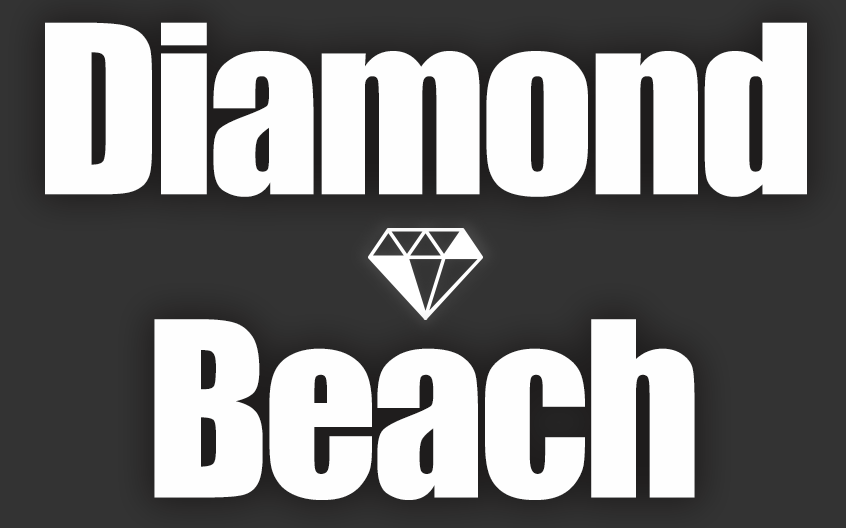
<style>
.page{position:relative;width:846px;height:528px;background:#fefefe}
.page>*{position:absolute;margin:0}
.t1{font:216.8px "Impact";letter-spacing:-0.03em;color:#fefefe;scale:1.03 1}
.t2{font:225.1px "Impact";letter-spacing:-0.03em;color:#fefefe}
</style>
<div class="page">
<p class="t1" style="left:45px;top:22px;width:762px;height:175px">Diamond</p>
<p class="t2" style="left:154px;top:319px;width:541px;height:181px">Beach</p>
</div>
